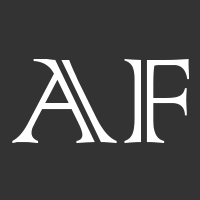
<style>
.page{position:relative;width:200px;height:200px;background:#333333}
.page>*{position:absolute;margin:0}
.t1{font:160px "ColonnaMT";color:#ffffff}
</style>
<div class="page">
<p class="t1" style="left:12px;top:59px;width:177px;height:84px">AF</p>
</div>
